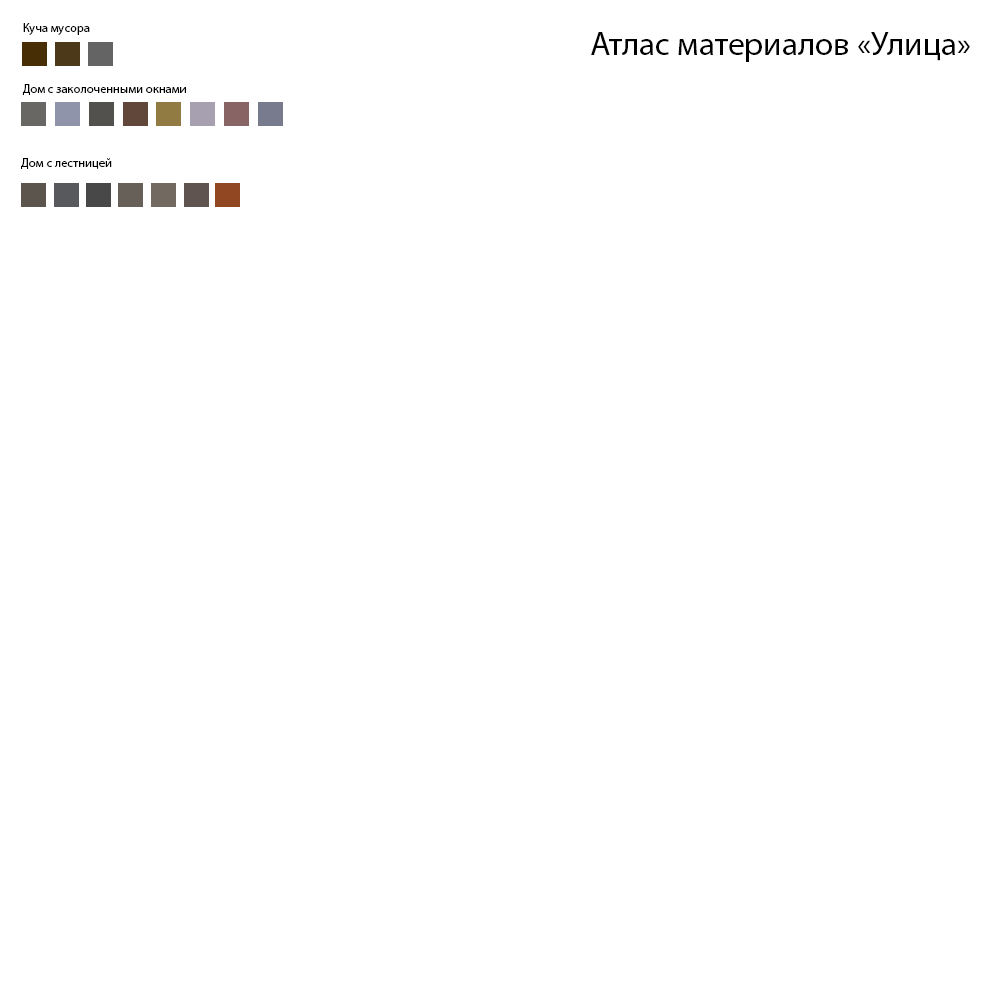
<style>
.page{position:relative;width:1000px;height:1000px;background:#ffffff}
.page>*{position:absolute;margin:0}
.t1{font:12.5px "MyriadPro-Regular";letter-spacing:0.001em;color:#000000}
.t2{font:33.3px "MyriadPro-Regular";letter-spacing:0.001em;color:#000000}
</style>
<div class="page">
<p class="t1" style="left:23px;top:23px;width:67px;height:12px">Куча мусора</p>
<p class="t2" style="left:591px;top:32px;width:379px;height:30px">Атлас материалов «Улица»</p>
<p class="t1" style="left:22px;top:84px;width:164px;height:11px">Дом с заколоченными окнами</p>
<p class="t1" style="left:21px;top:158px;width:91px;height:11px">Дом с лестницей</p>
</div>
